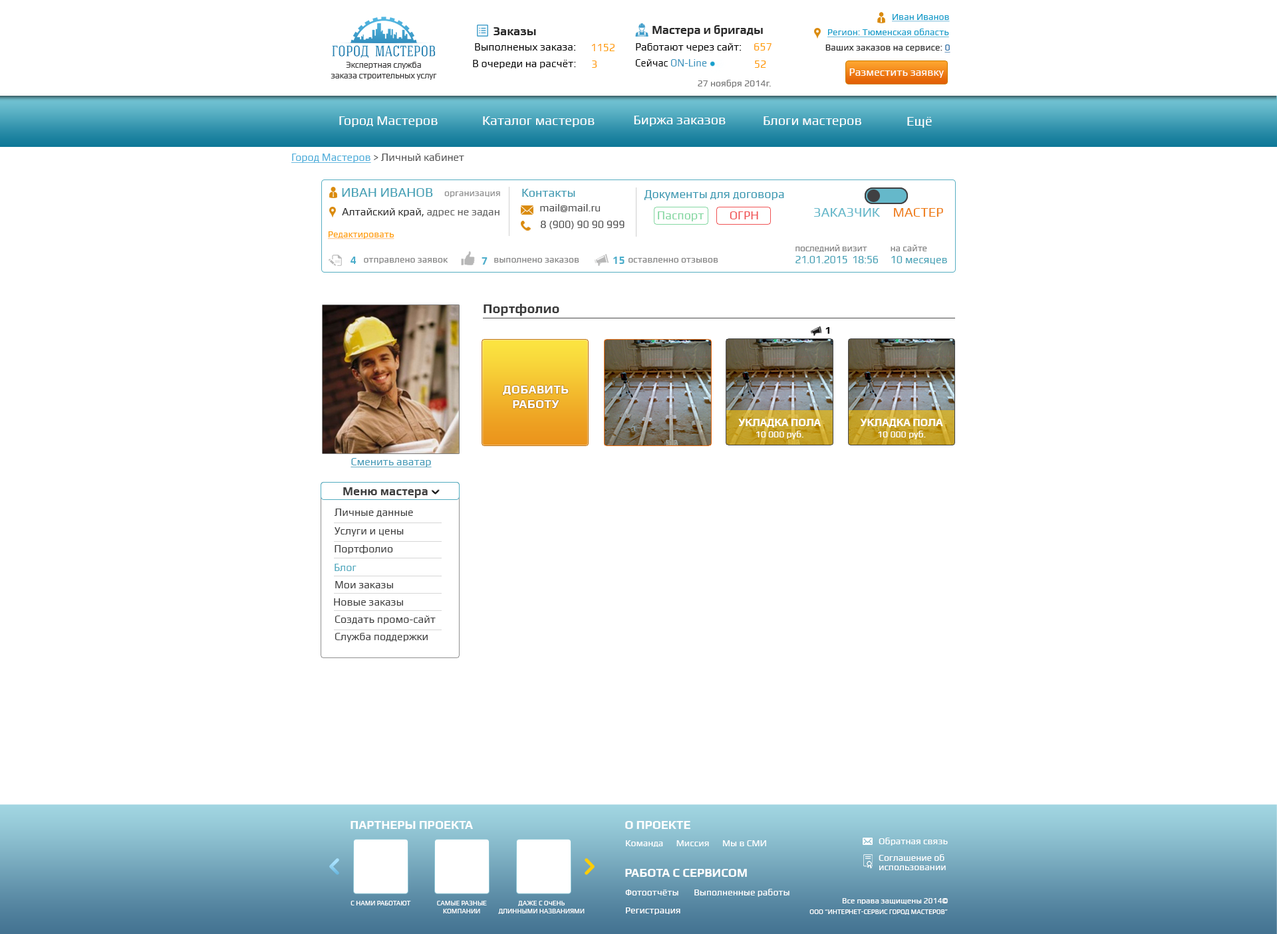
<style>
.page{position:relative;width:1277px;height:934px;background:#ffffff}
.page>*{position:absolute;margin:0}
.t1{font:9.3px "Play";color:#179ecb;text-decoration:underline}
.t2{font:12px "Play-Bold";color:#2a2a2a}
.t3{font:11.7px "Play-Bold";color:#2a2a2a}
.t4{font:9.3px "Play";color:#19a0cc;text-decoration:underline}
.t5{font:10.6px "Play";color:#000000}
.t6{font:10.5px "Play";color:#ff9e07}
.t7{font:10.6px "Play";color:#ff9e07}
.t8{font:9.3px "Play";color:#2a2a2a}
.t9{font:9.3px "Play";color:#226da7;text-decoration:underline}
.t10{font:8.6px "Play";letter-spacing:-0.016em;color:#403f3f}
.t11{font:10.6px "Play";color:#3c95bf;scale:0.95 1}
.t12{font:10.6px "Play";color:#000000;scale:0.95 1}
.t13{font:10.6px "Play";color:#ffffff}
.t14{font:9.3px "Play";color:#7a7a7a}
.t15{font:13.3px "Play";color:#ffffff}
.t16{font:10.6px "Play";color:#565656}
.t17{font:10.6px "Play";color:#4daeda;text-decoration:underline}
.t18{font:13.3px "Play";color:#45a1b6}
.t19{font:9.3px "Play";color:#909090}
.t20{font:11.9px "Play";color:#3c9ab2}
.t21{font:12px "Play";color:#3c9ab3}
.t22{font:10.6px "Play";color:#2d2d2d}
.t23{font:10.6px "Play";color:#616161}
.t24{font:10.6px "Play";color:#4c4c4c}
.t25{font:13.3px "Play";color:#65b8ca}
.t26{font:13.3px "Play";color:#ee7e18}
.t27{font:12px "Play";color:#84d7a1}
.t28{font:12px "Play";color:#f05253}
.t29{font:9.3px "Play";color:#ff9e07;text-decoration:underline}
.t30{font:10.8px/12px "Play";letter-spacing:-0.02em;color:#45a1b6}
.t31{font:9.4px/12px "Play";letter-spacing:-0.02em;color:#848484}
.t32{font:10.8px/12px "Play";color:#45a1b6}
.t33{font:9.4px/12px "Play";color:#848484}
.t34{font:10.6px "Play-Bold";color:#4caecb}
.t35{font:9.3px "Play";color:#858585}
.t36{font:13.3px "Play-Bold";color:#393939}
.t37{font:10.2px "Play-Bold";color:#161616}
.t38{font:12.2px "Play-Bold";color:#ffffff}
.t39{font:10.4px "Play-Bold";color:#ffffff}
.t40{font:9.3px "Play";color:#ffffff}
.t41{font:10.6px "Play";color:#439bb8;text-decoration:underline}
.t42{font:11.9px "Play-Bold";color:#3f3f3f}
.t43{font:10.7px "Play";color:#3f3f3f}
.t44{font:10.7px "Play";color:#50a9be}
.t45{font:10.5px "Play";color:#3f3f3f}
.t46{font:10.9px "Play";color:#3f3f3f}
.t47{font:10.6px "Play";color:#3f3f3f}
.t48{font:12px "Play-Bold";color:#ffffff;text-transform:uppercase}
.t49{font:9.3px/6.7px "Play";color:#ffffff}
.t50{font:6.6px "Play";color:#ffffff;text-transform:uppercase}
.t51{font:6.6px/5.3px "Play";color:#ffffff;text-transform:uppercase}
.t52{font:6.6px "Play";color:#ffffff}
.t53{font:8px "Play";color:#ffffff}
</style>
<div class="page">
<p class="t1" style="left:892px;top:14px;width:57px;height:8px">Иван Иванов</p>
<p class="t2" style="left:493px;top:27px;width:43px;height:8px">Заказы</p>
<p class="t3" style="left:652px;top:25px;width:111px;height:12px">Мастера и бригады</p>
<p class="t4" style="left:827px;top:29px;width:122px;height:8px">Регион: Тюменская область</p>
<p class="t5" style="left:475px;top:43px;width:101px;height:8px">Выполненых заказа:</p>
<p class="t6" style="left:591px;top:44px;width:23px;height:7px">1152</p>
<p class="t5" style="left:636px;top:43px;width:105px;height:9px">Работают через сайт:</p>
<p class="t7" style="left:754px;top:43px;width:17px;height:8px">657</p>
<p class="t8" style="left:825px;top:45px;width:125px;height:8px">Ваших заказов на сервисе: <span class="t9">0</span></p>
<p class="t10" style="left:330px;top:62px;width:107px;height:18px;text-align:center">Экспертная служба <br>заказа строительных услуг</p>
<p class="t5" style="left:473px;top:60px;width:103px;height:8px">В очереди на расчёт:</p>
<p class="t6" style="left:592px;top:61px;width:5px;height:7px">3</p>
<p class="t11" style="left:635px;top:59px;width:72px;height:7px"><span class="t12">Сейчас </span>ON-Line</p>
<p class="t7" style="left:755px;top:61px;width:11px;height:7px">52</p>
<p class="t13" style="left:849px;top:68px;width:94px;height:10px">Разместить заявку</p>
<p class="t14" style="left:697px;top:80px;width:74px;height:8px">27 ноября 2014г.</p>
<p class="t15" style="left:339px;top:116px;width:98px;height:11px">Город Мастеров</p>
<p class="t15" style="left:483px;top:116px;width:111px;height:11px">Каталог мастеров</p>
<p class="t15" style="left:634px;top:116px;width:91px;height:10px">Биржа заказов</p>
<p class="t15" style="left:763px;top:116px;width:98px;height:11px">Блоги мастеров</p>
<p class="t15" style="left:907px;top:117px;width:24px;height:11px">Ещё</p>
<p class="t16" style="left:291px;top:154px;width:173px;height:9px"><span class="t17">Город Мастеров </span>&gt; Личный кабинет</p>
<p class="t18" style="left:342px;top:188px;width:91px;height:9px">ИВАН ИВАНОВ</p>
<p class="t19" style="left:444px;top:191px;width:56px;height:6px">организация</p>
<p class="t20" style="left:522px;top:189px;width:53px;height:8px">Контакты</p>
<p class="t21" style="left:644px;top:190px;width:140px;height:11px">Документы для договора</p>
<p class="t22" style="left:342px;top:208px;width:157px;height:9px">Алтайский край, <span class="t23">адрес не задан</span></p>
<p class="t24" style="left:540px;top:204px;width:60px;height:8px">mail@mail.ru</p>
<p class="t25" style="left:814px;top:208px;width:66px;height:9px">ЗАКАЗЧИК</p>
<p class="t26" style="left:894px;top:208px;width:49px;height:9px">МАСТЕР</p>
<p class="t24" style="left:541px;top:221px;width:83px;height:9px">8 (900) 90 90 999</p>
<p class="t27" style="left:658px;top:211px;width:46px;height:10px">Паспорт</p>
<p class="t28" style="left:729px;top:211px;width:29px;height:8px">ОГРН</p>
<p class="t29" style="left:328px;top:231px;width:66px;height:8px">Редактировать</p>
<p class="t30" style="left:795px;top:245px;width:83px;height:18px"><span class="t31">последний визит<br></span>21.01.2015  18:56</p>
<p class="t32" style="left:890px;top:245px;width:57px;height:20px"><span class="t33">на сайте<br></span>10 месяцев</p>
<p class="t34" style="left:350px;top:257px;width:6px;height:7px">4</p>
<p class="t35" style="left:364px;top:258px;width:84px;height:6px">отправлено заявок</p>
<p class="t34" style="left:481px;top:257px;width:6px;height:8px">7</p>
<p class="t35" style="left:494px;top:258px;width:85px;height:5px">выполнено заказов</p>
<p class="t34" style="left:613px;top:257px;width:11px;height:7px">15</p>
<p class="t35" style="left:628px;top:258px;width:90px;height:5px">оставленно отзывов</p>
<p class="t36" style="left:483px;top:304px;width:76px;height:12px">Портфолио</p>
<p class="t37" style="left:825px;top:327px;width:4px;height:7px">1</p>
<p class="t38" style="left:503px;top:386px;width:65px;height:22px;text-align:center">ДОБАВИТЬ РАБОТУ</p>
<p class="t39" style="left:738px;top:419px;width:83px;height:20px;text-align:center">УКЛАДКА ПОЛА<br><span class="t40">10 000 руб.</span></p>
<p class="t39" style="left:860px;top:419px;width:83px;height:20px;text-align:center">УКЛАДКА ПОЛА<br><span class="t40">10 000 руб.</span></p>
<p class="t41" style="left:350px;top:458px;width:81px;height:9px">Сменить аватар</p>
<p class="t42" style="left:343px;top:487px;width:85px;height:11px">Меню мастера</p>
<p class="t43" style="left:334px;top:509px;width:79px;height:8px">Личные данные</p>
<p class="t43" style="left:334px;top:527px;width:70px;height:10px">Услуги и цены</p>
<p class="t43" style="left:334px;top:545px;width:59px;height:9px">Портфолио</p>
<p class="t44" style="left:334px;top:564px;width:22px;height:7px">Блог</p>
<p class="t45" style="left:335px;top:581px;width:58px;height:7px">Мои заказы</p>
<p class="t46" style="left:334px;top:598px;width:69px;height:8px">Новые заказы</p>
<p class="t47" style="left:334px;top:616px;width:101px;height:8px">Создать промо-сайт</p>
<p class="t43" style="left:334px;top:633px;width:94px;height:9px">Служба поддержки</p>
<p class="t48" style="left:350px;top:821px;width:123px;height:8px">Партнеры проекта</p>
<p class="t48" style="left:625px;top:821px;width:65px;height:8px">О проекте</p>
<p class="t40" style="left:626px;top:840px;width:140px;height:7px">Команда      Миссия      Мы в СМИ</p>
<p class="t40" style="left:878px;top:838px;width:69px;height:8px">Обратная связь</p>
<p class="t49" style="left:878px;top:854px;width:67px;height:16px;text-align:justify">Соглашение об <br>использовании</p>
<p class="t48" style="left:625px;top:869px;width:122px;height:8px">Работа с сервисом</p>
<p class="t40" style="left:625px;top:889px;width:164px;height:8px">Фотоотчёты       Выполненные работы</p>
<p class="t50" style="left:350px;top:901px;width:61px;height:5px">C нами работают</p>
<p class="t51" style="left:437px;top:901px;width:50px;height:13px;text-align:center">Самые разные<br>компании</p>
<p class="t51" style="left:498px;top:901px;width:86px;height:13px;text-align:center">Даже с очень<br>длинными названиями</p>
<p class="t52" style="left:809px;top:898px;width:138px;height:17px;text-align:right"><span class="t53">Все права защищены 2014©<br></span>ООО “ИНТЕРНЕТ-СЕРВИС ГОРОД МАСТЕРОВ”</p>
<p class="t40" style="left:626px;top:908px;width:54px;height:7px">Регистрация</p>
</div>
